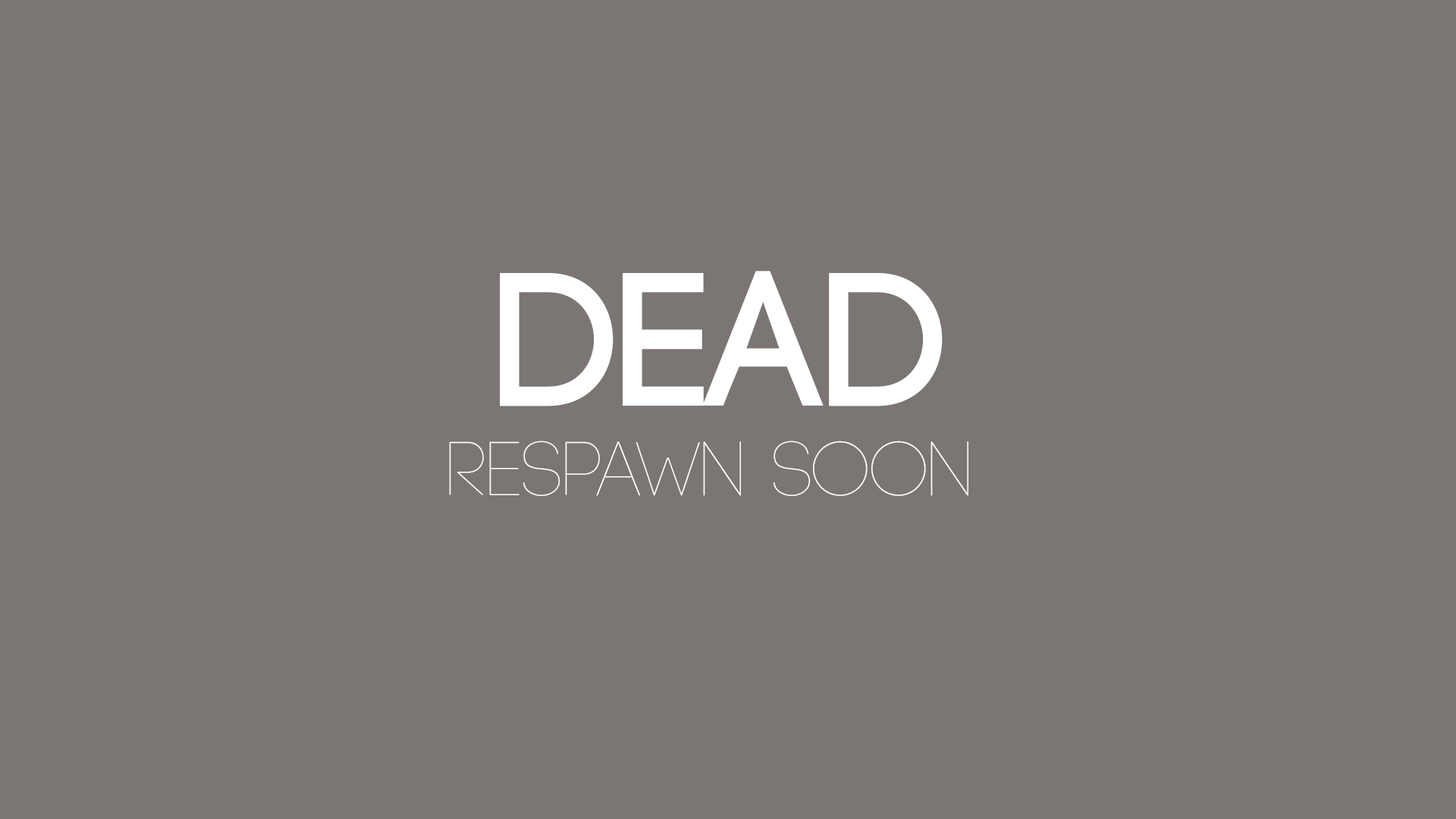
<style>
.page{position:relative;width:1456px;height:819px;background:#7b7574}
.page>*{position:absolute;margin:0}
.t1{font:189.6px "Code-Bold";color:#ffffff}
.t2{font:75.8px "Code-Light";color:#ffffff}
</style>
<div class="page">
<p class="t1" style="left:500px;top:271px;width:443px;height:135px">DEAD</p>
<p class="t2" style="left:449px;top:441px;width:519px;height:55px">respawn soon</p>
</div>
